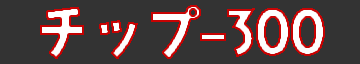
<style>
.page{position:relative;width:360px;height:64px;background:#333333}
.page>*{position:absolute;margin:0}
.t1{font:58.3px "AB-tombo_bold";letter-spacing:-0.1em;font-weight:bold}
</style>
<div class="page">
<p class="t1" style="left:40px;top:5px;width:285px;height:54px">チップ-300</p>
</div>
